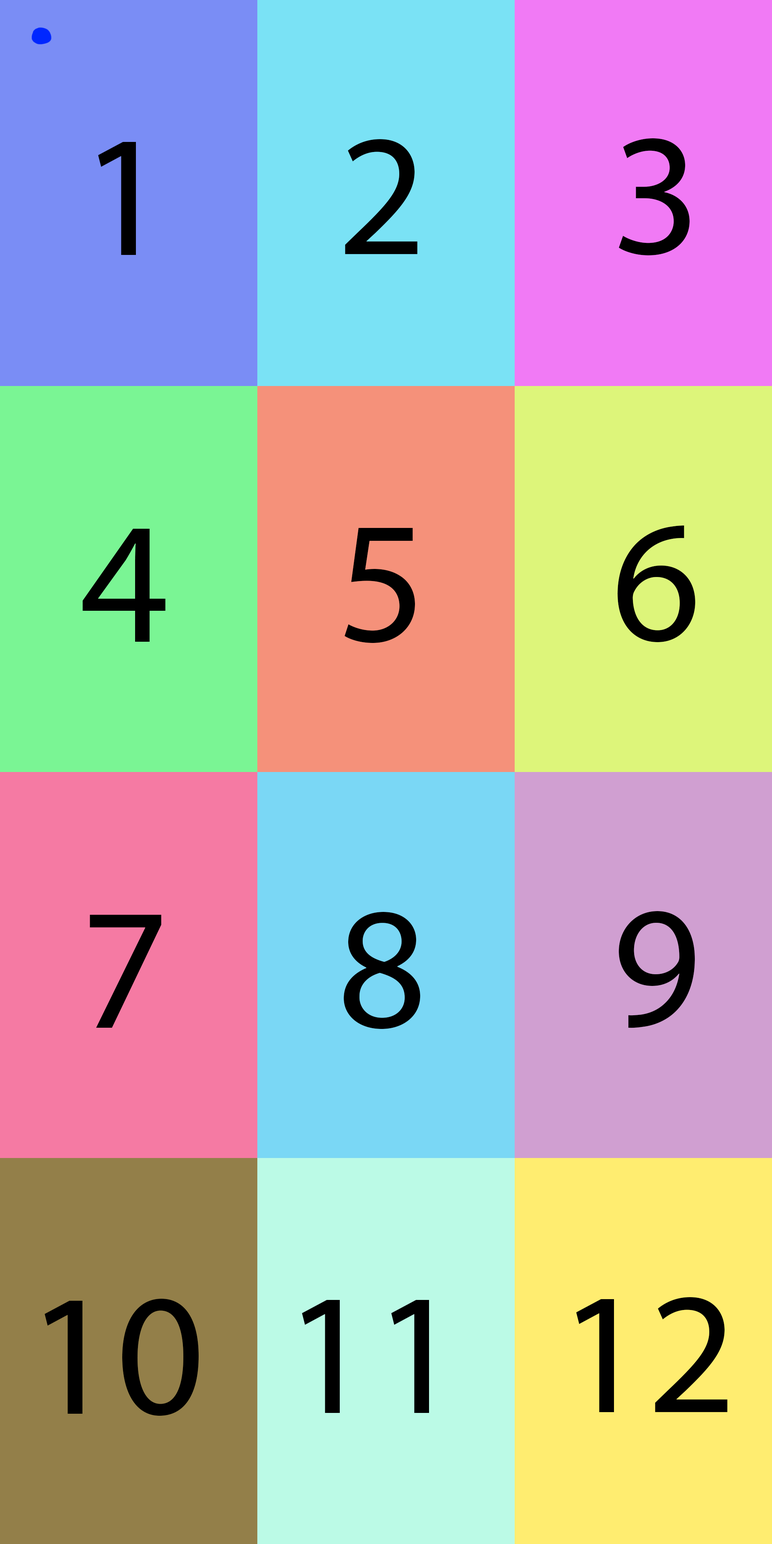
<style>
.page{position:relative;width:772px;height:1544px}
.page>*{position:absolute;margin:0}
.t1{font:174.1px "MyriadPro-Regular";color:#000000}
</style>
<div class="page">
<p class="t1" style="left:98px;top:142px;width:38px;height:113px">1</p>
<p class="t1" style="left:345px;top:139px;width:72px;height:115px">2</p>
<p class="t1" style="left:619px;top:138px;width:71px;height:117px">3</p>
<p class="t1" style="left:82px;top:529px;width:84px;height:113px">4</p>
<p class="t1" style="left:345px;top:528px;width:70px;height:115px">5</p>
<p class="t1" style="left:618px;top:525px;width:77px;height:118px">6</p>
<p class="t1" style="left:90px;top:915px;width:71px;height:113px">7</p>
<p class="t1" style="left:344px;top:912px;width:76px;height:118px">8</p>
<p class="t1" style="left:619px;top:911px;width:76px;height:117px">9</p>
<p class="t1" style="left:45px;top:1299px;width:154px;height:117px">10</p>
<p class="t1" style="left:302px;top:1300px;width:127px;height:113px">11</p>
<p class="t1" style="left:576px;top:1297px;width:152px;height:115px">12</p>
</div>
